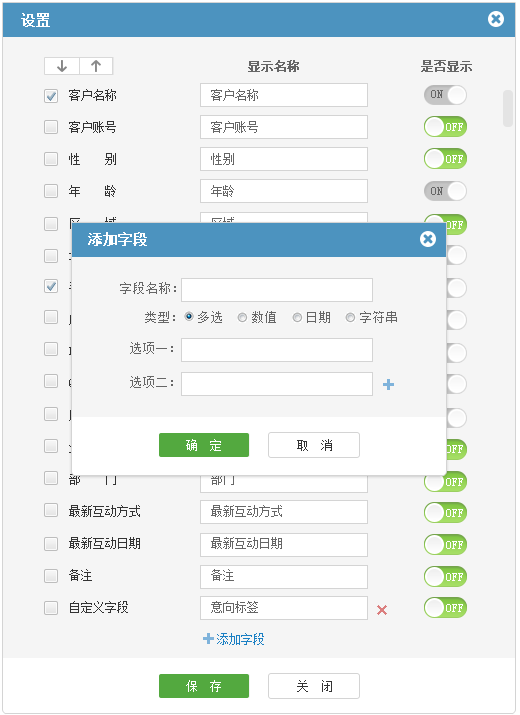
<style>
.page{position:relative;width:520px;height:715px;background:#f5f5f5}
.page>*{position:absolute;margin:0}
.t1{font:14px "SimSun";color:#ffffff;font-weight:bold}
.t2{font:12px "SimSun";color:#666666;font-weight:bold}
.t3{font:12px/32px "SimSun";color:#333333}
.t4{font:12px/32px "SimSun";color:#666666}
.t5{font:12px/32px "SimSun";color:#1b80c4}
.t6{font:12px "SimSun";color:#666666}
.t7{font:12px "SimSun";color:#ffffff}
.t8{font:13px "SimSun";color:#666666}
.t9{font:12px "SimSun";color:#333333}
</style>
<div class="page">
<p class="t1" style="left:21px;top:13px;width:29px;height:14px">设置</p>
<p class="t2" style="left:248px;top:60px;width:51px;height:12px">显示名称</p>
<p class="t2" style="left:421px;top:60px;width:51px;height:12px">是否显示</p>
<p class="t3" style="left:69px;top:89px;width:71px;height:524px">客户名称<br>客户账号<br>性    别<br>年    龄<br>区    域<br>地    址<br>手    机<br>座    机<br>Email<br>QQ<br>用户来源<br>业 务 员<br>部　　门<br>最新互动方式<br>最新互动日期<br>备注<br>自定义字段</p>
<p class="t4" style="left:211px;top:89px;width:71px;height:556px">客户名称<br>客户账号<br>性别<br>年龄<br>区域<br>地址<br>手机<br>座机<br>Email<br>QQ<br>用户来源<br>业 务 员<br>部门<br>最新互动方式<br>最新互动日期<br>备注<br>意向标签<br> <span class="t5">添加字段</span></p>
<p class="t6" style="left:431px;top:90px;width:12px;height:8px">ON</p>
<p class="t7" style="left:446px;top:123px;width:17px;height:8px">OFF</p>
<p class="t7" style="left:446px;top:155px;width:17px;height:8px">OFF</p>
<p class="t6" style="left:431px;top:187px;width:12px;height:8px">ON</p>
<p class="t7" style="left:446px;top:221px;width:17px;height:8px">OFF</p>
<p class="t1" style="left:88px;top:232px;width:59px;height:14px">添加字段</p>
<p class="t8" style="left:120px;top:282px;width:56px;height:12px">字段名称：</p>
<p class="t8" style="left:145px;top:311px;width:252px;height:12px">类型：  多选    数值    日期    字符串</p>
<p class="t8" style="left:130px;top:342px;width:43px;height:12px">选项一：</p>
<p class="t8" style="left:130px;top:376px;width:43px;height:12px">选项二：</p>
<p class="t7" style="left:186px;top:439px;width:35px;height:12px">确  定</p>
<p class="t9" style="left:297px;top:439px;width:35px;height:12px">取  消</p>
<p class="t7" style="left:446px;top:445px;width:17px;height:8px">OFF</p>
<p class="t7" style="left:446px;top:478px;width:17px;height:8px">OFF</p>
<p class="t7" style="left:446px;top:509px;width:17px;height:8px">OFF</p>
<p class="t7" style="left:446px;top:541px;width:17px;height:8px">OFF</p>
<p class="t7" style="left:446px;top:573px;width:17px;height:8px">OFF</p>
<p class="t7" style="left:446px;top:604px;width:17px;height:8px">OFF</p>
<p class="t7" style="left:186px;top:680px;width:35px;height:12px">保  存</p>
<p class="t9" style="left:297px;top:680px;width:35px;height:12px">关  闭</p>
</div>
